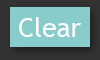
<style>
.page{position:relative;width:100px;height:60px;background:#88cdcc}
.page>*{position:absolute;margin:0}
.t1{font:26.7px "TrebuchetMS";color:#fefefe}
</style>
<div class="page">
<p class="t1" style="left:19px;top:17px;width:62px;height:20px">Clear</p>
</div>
